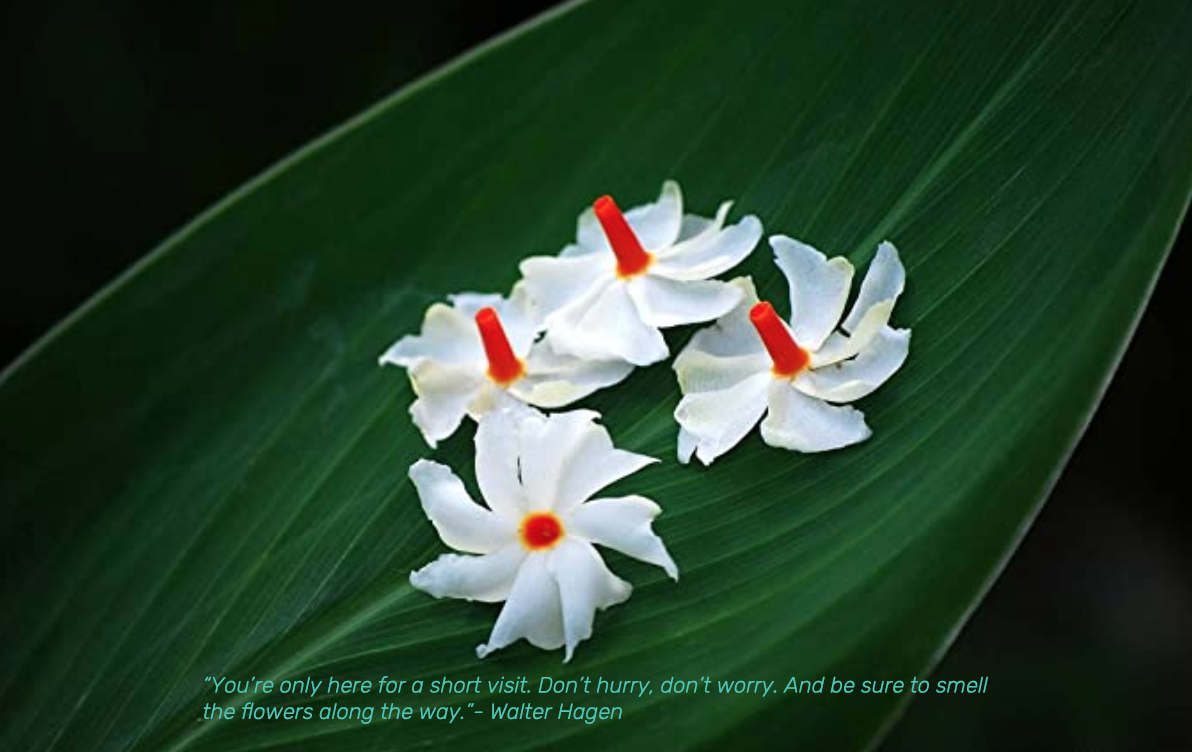
<style>
.page{position:relative;width:1192px;height:752px}
.page>*{position:absolute;margin:0}
.t1{font:22px "Rubik-LightItalic";color:#53c5b4}
</style>
<div class="page">
<p class="t1" style="left:203px;top:676px;width:785px;height:48px">“You’re only here for a short visit. Don’t hurry, don’t worry. And be sure to smell <br>the flowers along the way.”- Walter Hagen</p>
</div>
